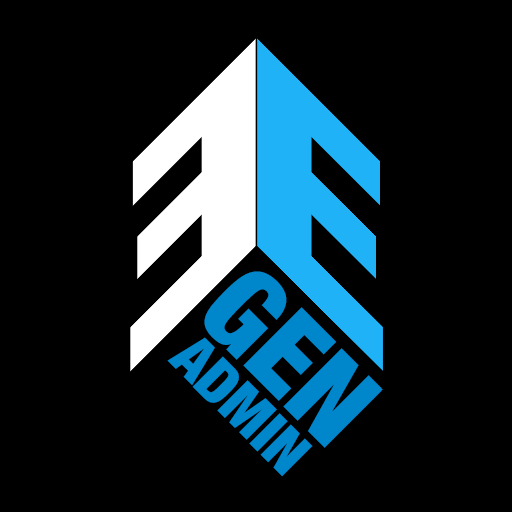
<style>
.page{position:relative;width:512px;height:512px;background:#000000}
.page>*{position:absolute;margin:0}
.t1{font:115.5px "HelveticaNeue-CondensedBlack";color:#0087cb}
.t2{font:60px "HelveticaNeue-CondensedBlack";color:#0087cb}
</style>
<div class="page">
<p class="t1" style="left:204px;top:271px;width:179px;height:177px;rotate:45deg">GEN</p>
<p class="t2" style="left:167px;top:337px;width:146px;height:140px;rotate:45deg">ADMIN</p>
</div>
